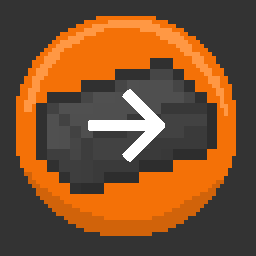
<style>
.page{position:relative;width:256px;height:256px;background:#333333}
.page>*{position:absolute;margin:0}
.t1{font:100px "Calibri-Bold";color:#ffffff}
</style>
<div class="page">
<p class="t1" style="left:88px;top:89px;width:77px;height:73px">→</p>
</div>
